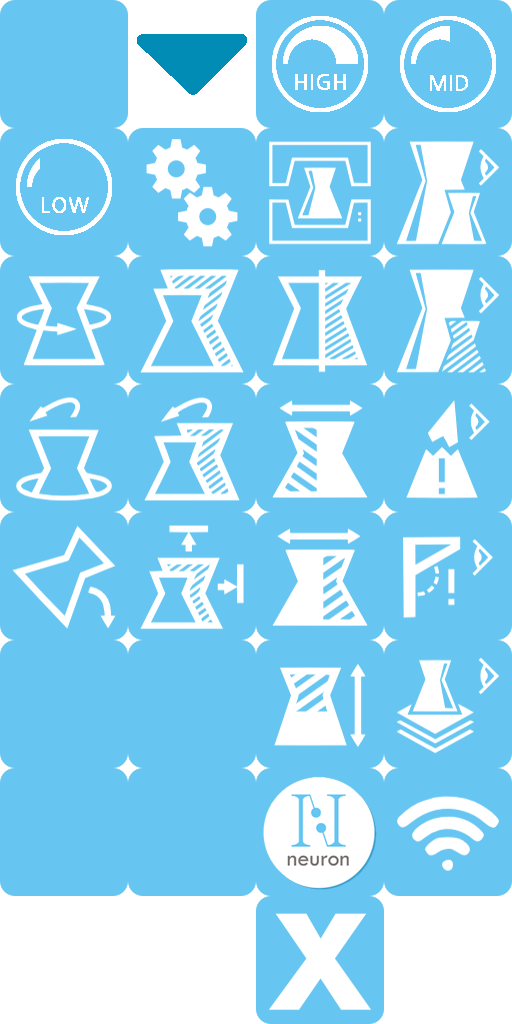
<style>
.page{position:relative;width:512px;height:1024px;background:#66c6f1}
.page>*{position:absolute;margin:0}
.t1{font:20px "NanumGothic";color:#ffffff;font-weight:bold}
</style>
<div class="page">
<p class="t1" style="left:295px;top:74px;width:51px;height:16px">HIGH</p>
<p class="t1" style="left:430px;top:75px;width:38px;height:16px">MID</p>
<p class="t1" style="left:42px;top:197px;width:47px;height:16px">LOW</p>
</div>
